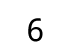
<style>
.page{position:relative;width:70px;height:55px;background:#ffffff}
.page>*{position:absolute;margin:0}
.t1{font:31.8px "DroidSans";color:#000000}
</style>
<div class="page">
<p class="t1" style="left:28px;top:18px;width:15px;height:24px">6</p>
</div>
